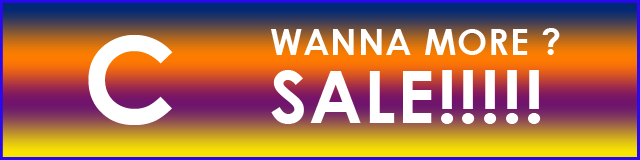
<style>
.page{position:relative;width:640px;height:160px}
.page>*{position:absolute;margin:0}
.t1{font:36px/18.5px "CenturyGothic-Bold";letter-spacing:0.025em;color:#ffffff}
.t2{font:72px/18.5px "CenturyGothic-Bold";letter-spacing:0.025em;color:#ffffff}
.t3{font:120px "CenturyGothic-Bold";letter-spacing:0.025em;color:#ffffff}
</style>
<div class="page">
<p class="t1" style="left:271px;top:28px;width:289px;height:96px">WANNA MORE ?<br><br><span class="t2">SALE!!!!!</span></p>
<p class="t3" style="left:88px;top:35px;width:85px;height:90px">C</p>
</div>
